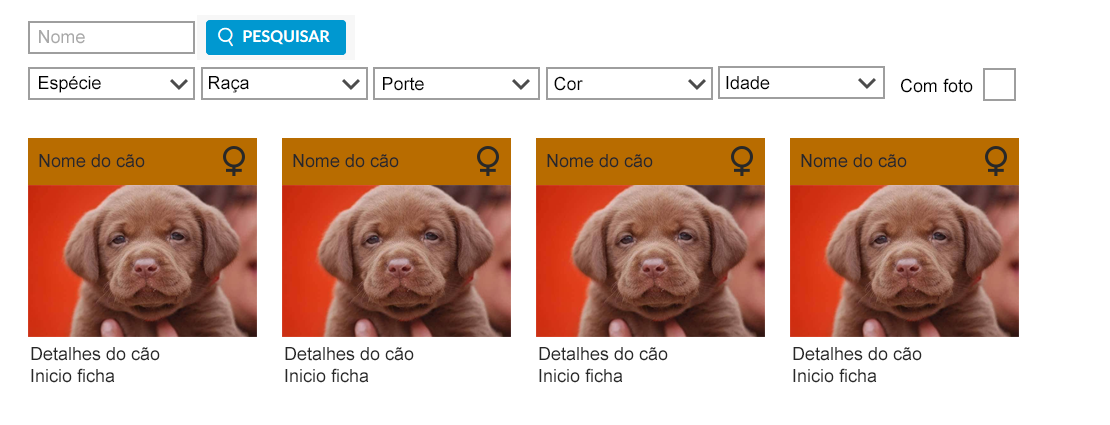
<style>
.page{position:relative;width:1110px;height:425px;background:#ffffff}
.page>*{position:absolute;margin:0}
.t1{font:18px "ArialMT";color:#a8a8a8}
.t2{font:18px "ArialMT";color:#000000}
.t3{font:18px "ArialMT";color:#282828}
</style>
<div class="page">
<p class="t1" style="left:39px;top:30px;width:46px;height:14px">Nome</p>
<p class="t2" style="left:39px;top:76px;width:62px;height:17px">Espécie</p>
<p class="t2" style="left:209px;top:76px;width:40px;height:17px">Raça</p>
<p class="t2" style="left:383px;top:77px;width:41px;height:14px">Porte</p>
<p class="t2" style="left:554px;top:76px;width:29px;height:15px">Cor</p>
<p class="t2" style="left:726px;top:76px;width:44px;height:14px">Idade</p>
<p class="t2" style="left:901px;top:78px;width:72px;height:15px">Com foto</p>
<p class="t3" style="left:39px;top:154px;width:106px;height:14px">Nome do cão</p>
<p class="t3" style="left:293px;top:154px;width:106px;height:14px">Nome do cão</p>
<p class="t3" style="left:547px;top:154px;width:106px;height:14px">Nome do cão</p>
<p class="t3" style="left:801px;top:154px;width:106px;height:14px">Nome do cão</p>
<p class="t3" style="left:31px;top:347px;width:129px;height:36px">Detalhes do cão<br>Inicio ficha</p>
<p class="t3" style="left:285px;top:347px;width:129px;height:36px">Detalhes do cão<br>Inicio ficha</p>
<p class="t3" style="left:539px;top:347px;width:129px;height:36px">Detalhes do cão<br>Inicio ficha</p>
<p class="t3" style="left:793px;top:347px;width:129px;height:36px">Detalhes do cão<br>Inicio ficha</p>
</div>
